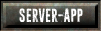
<style>
.page{position:relative;width:101px;height:31px}
.page>*{position:absolute;margin:0}
.t1{font:19px "Sunzoomspark";color:#ffffff}
</style>
<div class="page">
<p class="t1" style="left:19px;top:8px;width:64px;height:15px">SERVER-APP</p>
</div>
